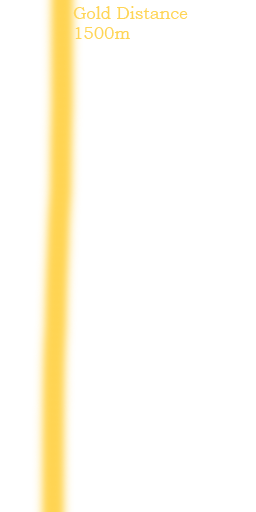
<style>
.page{position:relative;width:256px;height:512px;background:#ffffff}
.page>*{position:absolute;margin:0}
.t1{font:16.7px "BookmanOldStyle";color:#ffd556}
</style>
<div class="page">
<p class="t1" style="left:73px;top:6px;width:115px;height:33px">Gold Distance<br>1500m</p>
</div>
